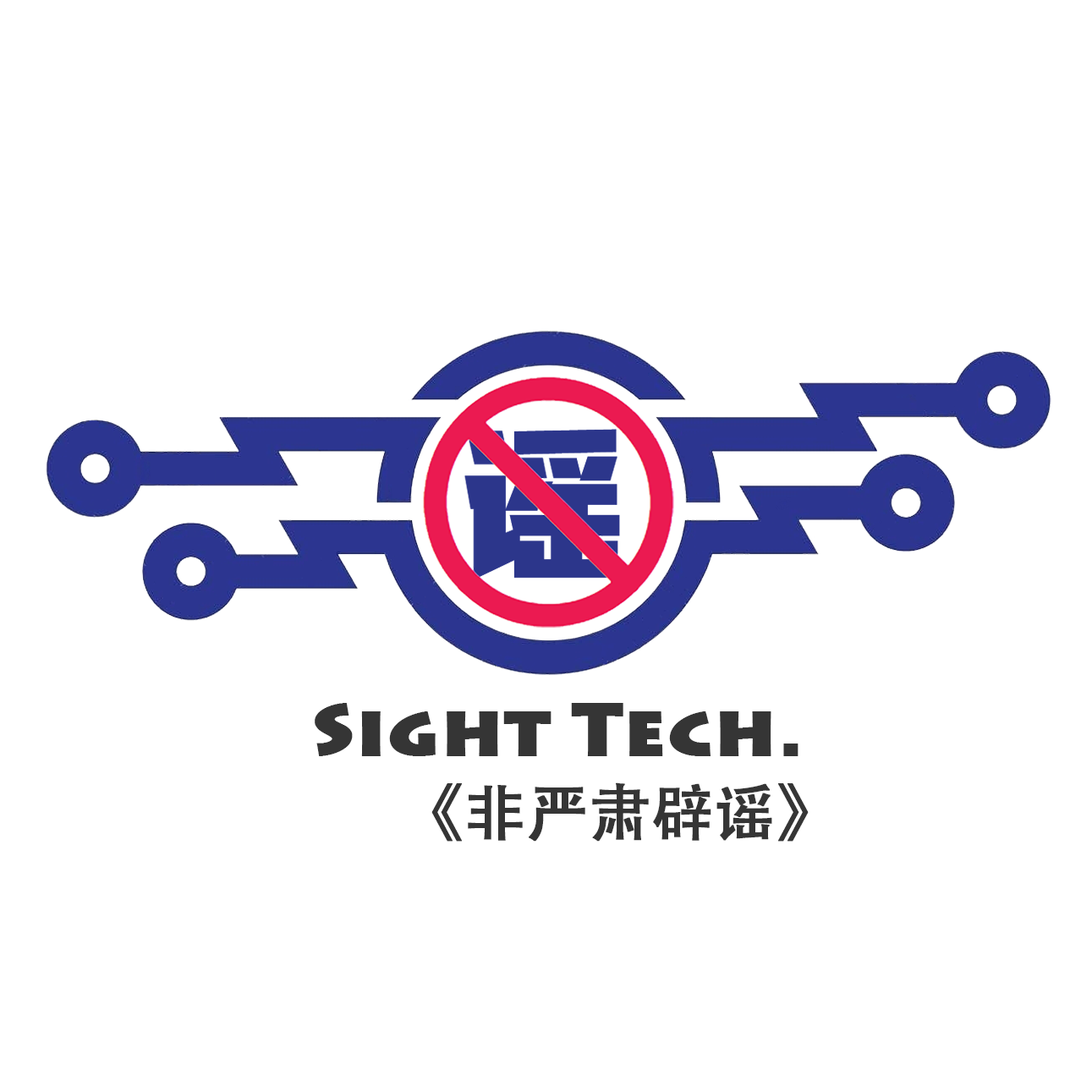
<style>
.page{position:relative;width:1092px;height:1092px;background:#ffffff}
.page>*{position:absolute;margin:0}
.t1{font:74.4px "Lithos-Black";color:#353535;font-weight:bold}
.t2{font:60.9px "AdobeHeitiStd-Regular";color:#353535;font-weight:bold}
</style>
<div class="page">
<p class="t1" style="left:315px;top:703px;width:483px;height:53px">Sight Tech.</p>
<p class="t2" style="left:431px;top:782px;width:378px;height:60px">《非严肃辟谣》</p>
</div>
